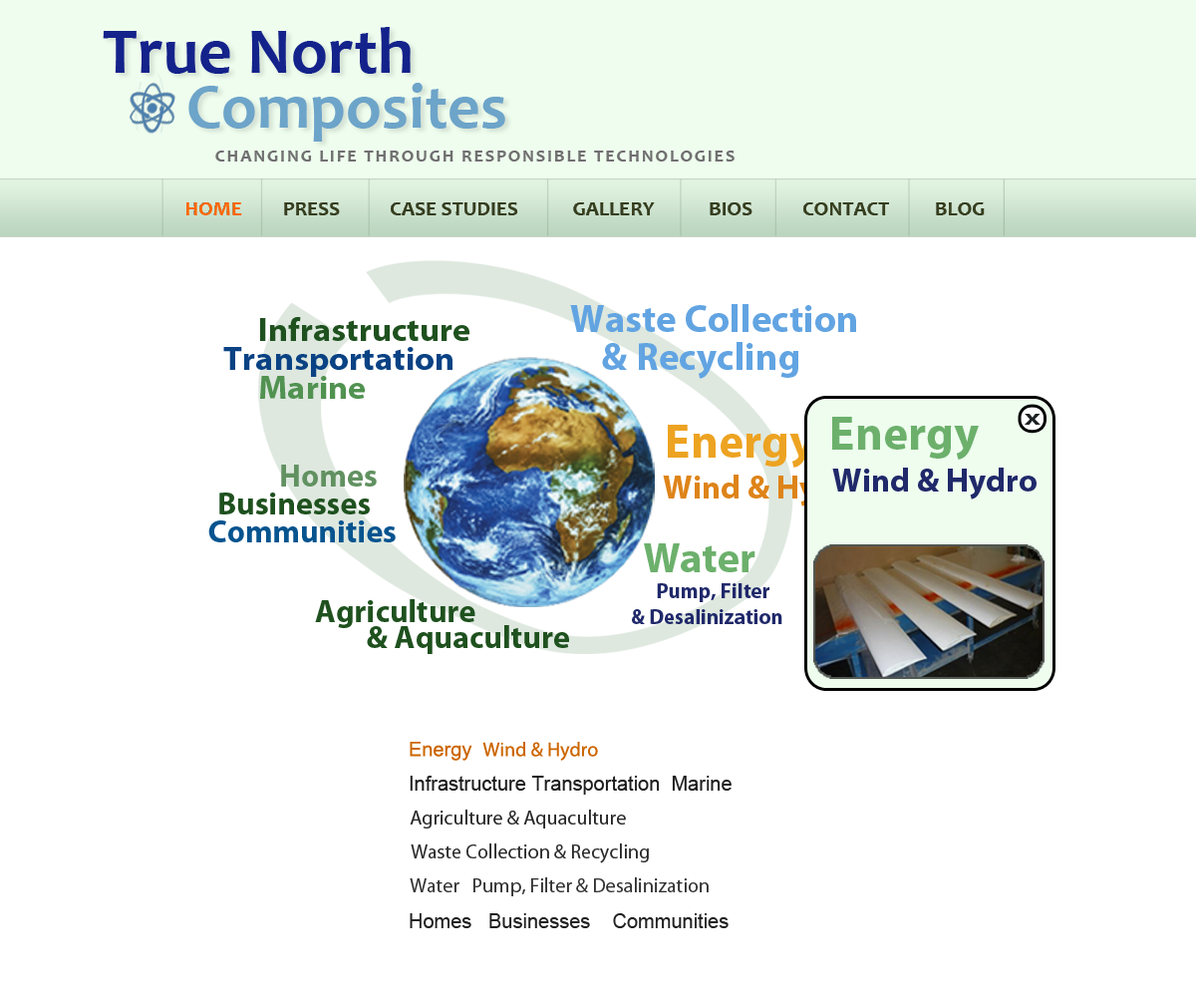
<style>
.page{position:relative;width:1196px;height:997px;background:#ffffff}
.page>*{position:absolute;margin:0}
.t1{font:66.2px/54.8px "Candara-Bold";color:#14228b}
.t2{font:64px/54.8px "Candara-Bold";color:#6da4c9}
.t3{font:17.9px "Candara-Bold";letter-spacing:0.1em;color:#707070;text-transform:uppercase}
.t4{font:20.9px "Candara-Bold";color:#353d1d;text-transform:uppercase}
.t5{font:20.9px "Candara-Bold";color:#ff6600;text-transform:uppercase}
.t6{font:38.8px/37.9px "MyriadPro-Bold";color:#62a4e2}
.t7{font:33.2px/28.9px "MyriadPro-Bold";color:#1f511f;scale:1.03 1}
.t8{font:33.2px/28.9px "MyriadPro-Bold";color:#0a4284;scale:1.03 1}
.t9{font:33.2px/28.9px "MyriadPro-Bold";color:#519251;scale:1.03 1}
.t10{font:16.3px "MyriadPro-Bold";color:#1e2123;scale:1.66 1}
.t11{font:47.5px "MyriadPro-Bold";color:#eda322}
.t12{font:47.5px "MyriadPro-Bold";color:#6cb06c}
.t13{font:31.8px/27.9px "MyriadPro-Bold";color:#07548f}
.t14{font:31.8px/27.9px "MyriadPro-Bold";color:#619161}
.t15{font:31.8px/27.9px "MyriadPro-Bold";color:#1f511f}
.t16{font:33.1px "MyriadPro-Bold";color:#20296a}
.t17{font:33.1px "MyriadPro-Bold";color:#de8419}
.t18{font:41.9px "MyriadPro-Bold";color:#6cb06c}
.t19{font:20.9px "MyriadPro-Bold";color:#20296a}
.t20{font:31.8px/25.9px "MyriadPro-Bold";color:#1f511f}
.t21{font:19.9px "MyriadPro-Regular";color:#cc6600}
.t22{font:19.9px "ArialMT";color:#cc6600}
.t23{font:19.9px "ArialMT";color:#1e1e1e}
.t24{font:19.9px "MyriadPro-Regular";color:#252525}
.t25{font:19.9px "MyriadPro-Regular";color:#292929}
.t26{font:19.9px "MyriadPro-Regular";color:#303030}
.t27{font:19.9px "ArialMT";color:#222222}
</style>
<div class="page">
<p class="t1" style="left:103px;top:27px;width:402px;height:115px">True North <br><span class="t2">      Composites</span></p>
<p class="t3" style="left:215px;top:151px;width:520px;height:10px">Changing life through responsible technologies</p>
<p class="t4" style="left:186px;top:202px;width:799px;height:13px"><span class="t5">Home  </span>       Press           Case Studies            Gallery            Bios           Contact          Blog</p>
<p class="t6" style="left:570px;top:304px;width:286px;height:75px">Waste Collection<br>    &amp; Recycling</p>
<p class="t7" style="left:223px;top:317px;width:247px;height:82px">Infrastructure<br>    <span class="t8">Transportation<br>         </span><span class="t9">Marine</span></p>
<p class="t10" style="left:1025px;top:414px;width:16px;height:11px">X</p>
<p class="t11" style="left:668px;top:425px;width:146px;height:43px">Energy</p>
<p class="t12" style="left:832px;top:417px;width:147px;height:43px">Energy</p>
<p class="t13" style="left:208px;top:465px;width:188px;height:77px;text-align:right"><span class="t14">Homes  </span><span class="t15"> <br>Businesses    <br>      </span>Communities</p>
<p class="t16" style="left:832px;top:468px;width:205px;height:31px">Wind &amp; Hydro</p>
<p class="t17" style="left:663px;top:474px;width:204px;height:32px">Wind &amp; Hydro</p>
<p class="t18" style="left:644px;top:543px;width:112px;height:29px">Water</p>
<p class="t19" style="left:632px;top:583px;width:151px;height:41px">Pump, Filter<br>&amp; Desalinization</p>
<p class="t20" style="left:315px;top:599px;width:254px;height:55px">Agriculture<br>        &amp; Aquaculture</p>
<p class="t21" style="left:410px;top:742px;width:188px;height:19px"><span class="t22">Energy  </span>Wind &amp; Hydro</p>
<p class="t23" style="left:410px;top:776px;width:322px;height:18px">Infrastructure Transportation  Marine</p>
<p class="t24" style="left:410px;top:809px;width:216px;height:19px">Agriculture &amp; Aquaculture</p>
<p class="t25" style="left:411px;top:843px;width:238px;height:20px">Waste Collection &amp; Recycling</p>
<p class="t26" style="left:410px;top:877px;width:299px;height:19px">Water   Pump, Filter &amp; Desalinization</p>
<p class="t27" style="left:410px;top:913px;width:319px;height:15px">Homes   Businesses    Communities</p>
</div>
